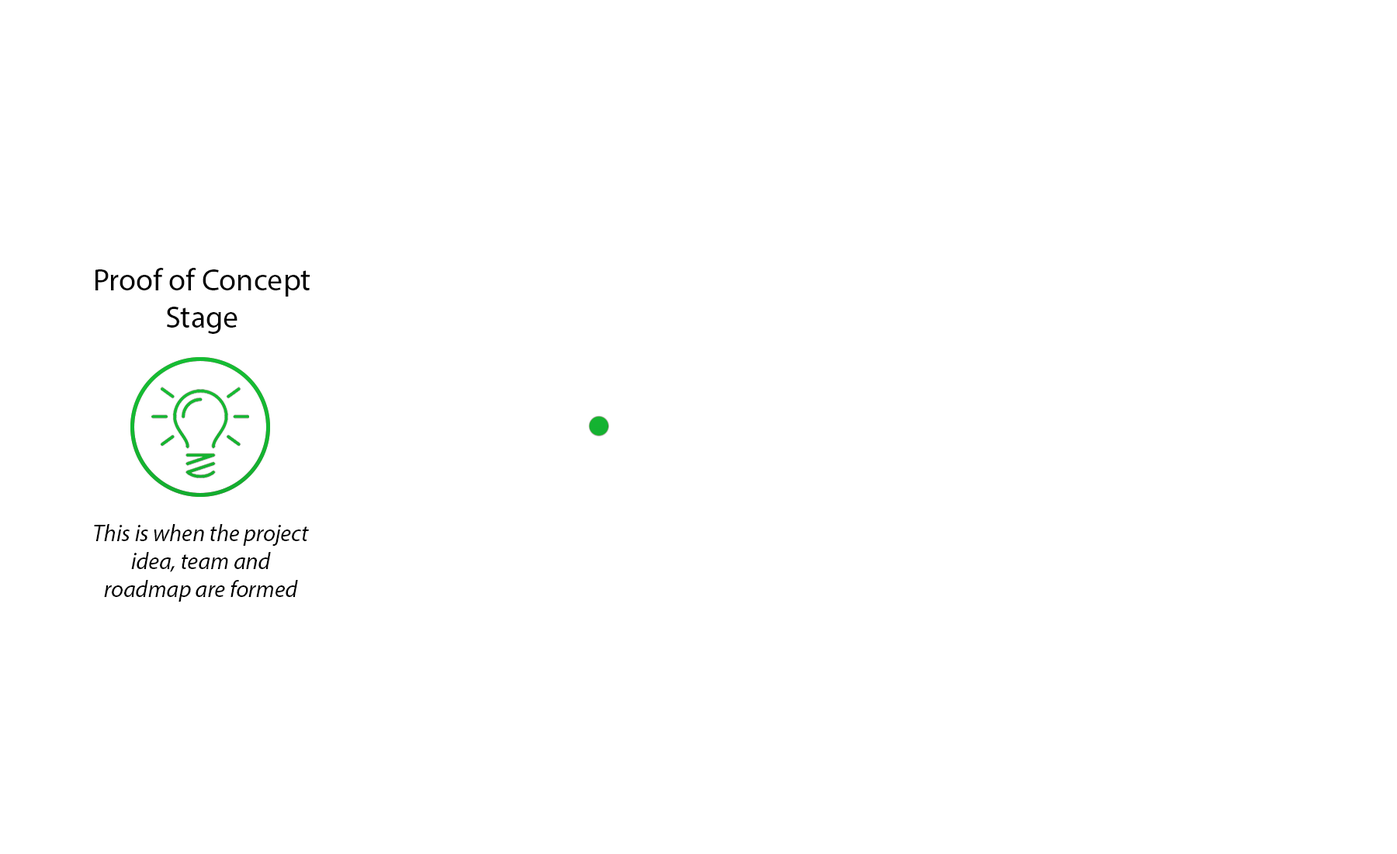
<style>
.page{position:relative;width:1397px;height:854px;background:#ffffff}
.page>*{position:absolute;margin:0}
.t1{font:31px "MyriadPro-Regular";color:#000000}
.t2{font:23.3px "MyriadPro-It";color:#000000}
</style>
<div class="page">
<p class="t1" style="left:95px;top:268px;width:215px;height:66px;text-align:center">Proof of Concept Stage</p>
<p class="t2" style="left:94px;top:524px;width:215px;height:77px;text-align:center">This is when the project idea, team and roadmap are formed</p>
</div>
